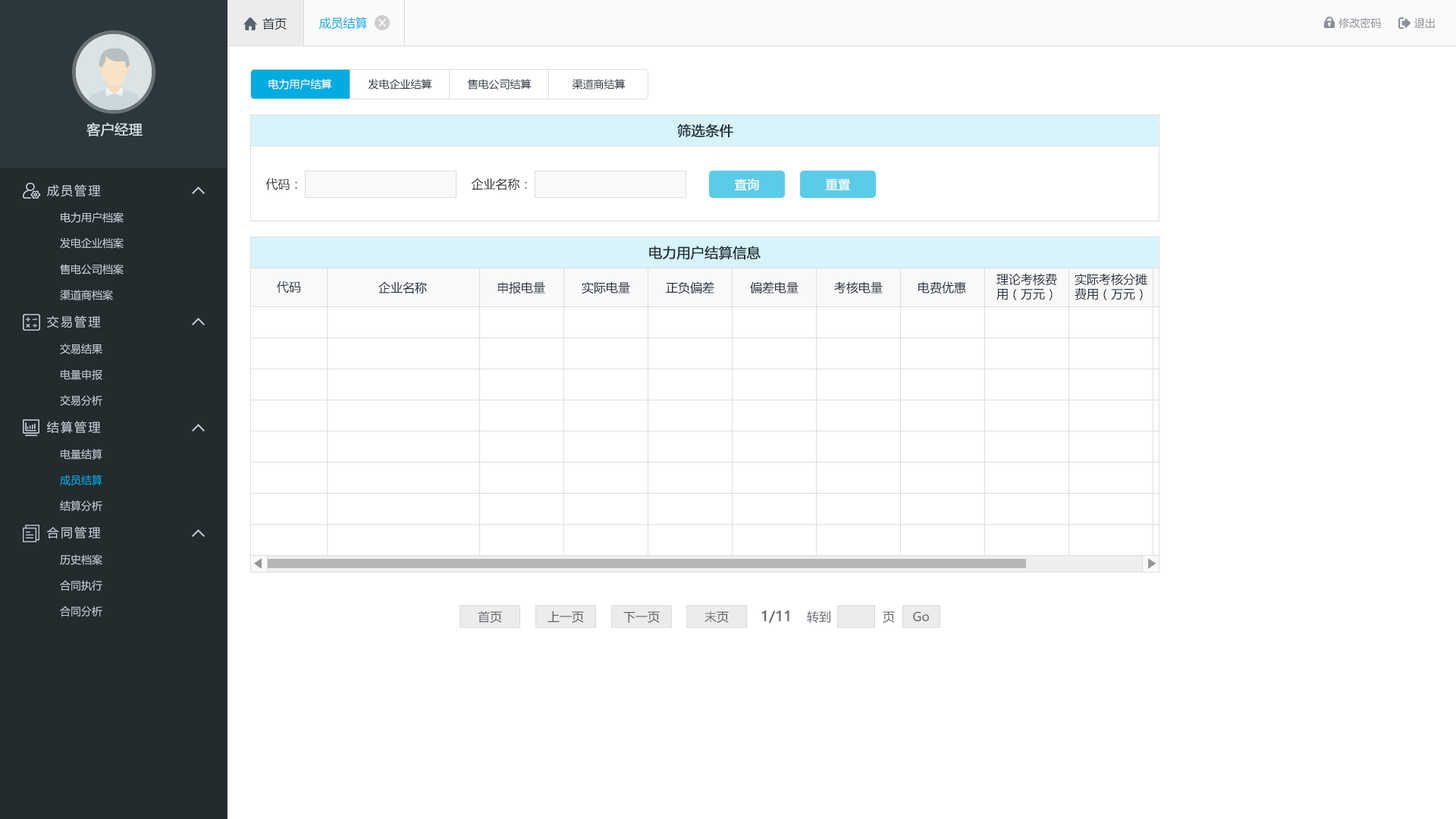
<style>
.page{position:relative;width:1456px;height:819px;background:#ffffff}
.page>*{position:absolute;margin:0}
.t1{font:12.1px "MicrosoftYaHei";color:#242e3b}
.t2{font:12.1px "MicrosoftYaHei";color:#00ace2}
.t3{font:10.6px "MicrosoftYaHei";color:#8a8f99}
.t4{font:10.6px "MicrosoftYaHei";color:#ffffff}
.t5{font:10.6px "MicrosoftYaHei";color:#242e3b}
.t6{font:13.6px "MicrosoftYaHei";color:#d1dce2;font-weight:bold}
.t7{font:13.6px "MicrosoftYaHei";color:#242e3b;font-weight:bold}
.t8{font:12.1px "MicrosoftYaHei";letter-spacing:0.14em;color:#c2cdd2}
.t9{font:12.1px "MicrosoftYaHei";color:#333333}
.t10{font:12.1px "MicrosoftYaHei";color:#ffffff;font-weight:bold}
.t11{font:10.6px "MicrosoftYaHei";color:#c2cdd2}
.t12{font:10.6px "MicrosoftYaHei";color:#00ace2}
.t13{font:12.1px "MicrosoftYaHei";color:#61656b}
.t14{font:13.6px "MicrosoftYaHei";color:#61656b;font-weight:bold}
</style>
<div class="page">
<p class="t1" style="left:262px;top:17px;width:25px;height:13px">首页</p>
<p class="t2" style="left:318px;top:17px;width:49px;height:13px">成员结算</p>
<p class="t3" style="left:1338px;top:17px;width:43px;height:12px">修改密码</p>
<p class="t3" style="left:1414px;top:17px;width:21px;height:11px">退出</p>
<p class="t4" style="left:268px;top:79px;width:64px;height:10px">电力用户结算</p>
<p class="t5" style="left:368px;top:79px;width:64px;height:10px">发电企业结算</p>
<p class="t5" style="left:467px;top:79px;width:65px;height:10px">售电公司结算</p>
<p class="t5" style="left:572px;top:79px;width:54px;height:10px">渠道商结算</p>
<p class="t6" style="left:86px;top:122px;width:57px;height:14px">客户经理</p>
<p class="t7" style="left:677px;top:124px;width:56px;height:14px">筛选条件</p>
<p class="t8" style="left:47px;top:184px;width:54px;height:13px">成员管理</p>
<p class="t9" style="left:265px;top:178px;width:32px;height:12px">代码：</p>
<p class="t9" style="left:471px;top:178px;width:56px;height:12px">企业名称：</p>
<p class="t10" style="left:734px;top:178px;width:25px;height:12px">查询</p>
<p class="t10" style="left:825px;top:179px;width:26px;height:11px">重置</p>
<p class="t11" style="left:61px;top:212px;width:63px;height:11px">电力用户档案</p>
<p class="t11" style="left:60px;top:237px;width:64px;height:12px">发电企业档案</p>
<p class="t7" style="left:649px;top:246px;width:112px;height:14px">电力用户结算信息</p>
<p class="t11" style="left:60px;top:264px;width:64px;height:11px">售电公司档案</p>
<p class="t1" style="left:277px;top:281px;width:24px;height:12px">代码</p>
<p class="t1" style="left:378px;top:281px;width:49px;height:13px">企业名称</p>
<p class="t1" style="left:497px;top:281px;width:48px;height:13px">申报电量</p>
<p class="t1" style="left:582px;top:281px;width:48px;height:13px">实际电量</p>
<p class="t1" style="left:666px;top:281px;width:48px;height:13px">正负偏差</p>
<p class="t1" style="left:750px;top:281px;width:49px;height:12px">偏差电量</p>
<p class="t1" style="left:834px;top:281px;width:49px;height:13px">考核电量</p>
<p class="t1" style="left:918px;top:281px;width:48px;height:13px">电费优惠</p>
<p class="t1" style="left:996px;top:273px;width:61px;height:27px;text-align:center">理论考核费<br>用（万元）</p>
<p class="t1" style="left:1075px;top:273px;width:72px;height:27px;text-align:center">实际考核分摊<br>费用（万元）</p>
<p class="t11" style="left:60px;top:290px;width:53px;height:10px">渠道商档案</p>
<p class="t8" style="left:47px;top:315px;width:54px;height:13px">交易管理</p>
<p class="t11" style="left:60px;top:344px;width:42px;height:10px">交易结果</p>
<p class="t11" style="left:61px;top:369px;width:41px;height:11px">电量申报</p>
<p class="t11" style="left:60px;top:395px;width:42px;height:11px">交易分析</p>
<p class="t8" style="left:47px;top:421px;width:54px;height:13px">结算管理</p>
<p class="t11" style="left:61px;top:449px;width:41px;height:11px">电量结算</p>
<p class="t12" style="left:60px;top:475px;width:42px;height:10px">成员结算</p>
<p class="t11" style="left:60px;top:500px;width:42px;height:11px">结算分析</p>
<p class="t8" style="left:47px;top:526px;width:54px;height:12px">合同管理</p>
<p class="t11" style="left:60px;top:554px;width:42px;height:11px">历史档案</p>
<p class="t11" style="left:60px;top:580px;width:42px;height:11px">合同执行</p>
<p class="t11" style="left:60px;top:606px;width:42px;height:11px">合同分析</p>
<p class="t13" style="left:478px;top:610px;width:24px;height:13px">首页</p>
<p class="t13" style="left:548px;top:611px;width:36px;height:12px">上一页</p>
<p class="t13" style="left:623px;top:611px;width:37px;height:12px">下一页</p>
<p class="t13" style="left:704px;top:610px;width:25px;height:13px">末页</p>
<p class="t14" style="left:761px;top:610px;width:28px;height:13px">1/11</p>
<p class="t13" style="left:807px;top:610px;width:23px;height:13px">转到</p>
<p class="t13" style="left:883px;top:611px;width:12px;height:12px">页</p>
<p class="t13" style="left:913px;top:611px;width:16px;height:11px">Go</p>
</div>
